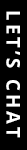
<style>
.page{position:relative;width:27px;height:150px;background:#000000}
.page>*{position:absolute;margin:0}
.t1{font:18.7px "OpenSans-Bold";letter-spacing:0.17em;color:#ffffff}
</style>
<div class="page">
<p class="t1" style="left:6px;top:11px;width:14px;height:127px;rotate:90deg">LET’S CHAT</p>
</div>
